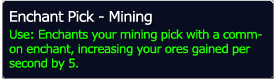
<style>
.page{position:relative;width:275px;height:80px;background:#080d21}
.page>*{position:absolute;margin:0}
.t1{font:14.7px "Verdana";letter-spacing:-0.05em;color:#ffffff}
.t2{font:12px "Verdana";letter-spacing:-0.05em;color:#1eff00}
</style>
<div class="page">
<p class="t1" style="left:10px;top:10px;width:142px;height:15px">Enchant Pick - Mining</p>
<p class="t2" style="left:9px;top:29px;width:253px;height:41px">Use: Enchants your mining pick with a comm-<br>on enchant, increasing your ores gained per <br>second by 5.</p>
</div>
